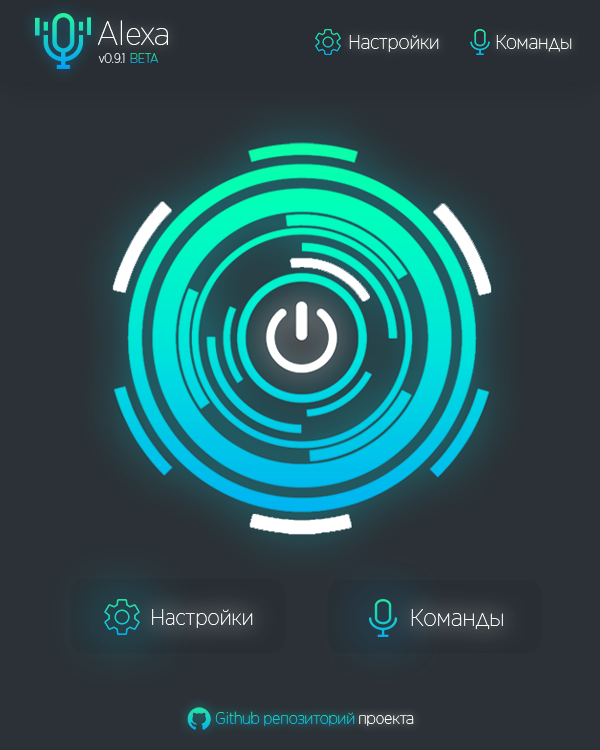
<style>
.page{position:relative;width:600px;height:750px;background:#2b3136}
.page>*{position:absolute;margin:0}
.t1{font:33.6px "GothamNarrow-Thin";letter-spacing:-0.01em;color:#ffffff}
.t2{font:20.1px "GothamNarrow-Thin";letter-spacing:-0.01em;color:#ffffff}
.t3{font:13.1px "GothamNarrow-Thin";letter-spacing:-0.01em}
.t4{font:22.6px "GothamNarrow-Thin";letter-spacing:-0.01em;color:#ffffff}
.t5{font:24.4px "GothamNarrow-Thin";letter-spacing:-0.01em;color:#ffffff}
.t6{font:16.3px "GothamNarrow-Thin";letter-spacing:-0.01em;color:#13c6d1}
.t7{font:16.3px "GothamNarrow-Thin";letter-spacing:-0.01em;color:#ffffff}
</style>
<div class="page">
<p class="t1" style="left:98px;top:20px;width:70px;height:25px">Alexa</p>
<p class="t2" style="left:349px;top:35px;width:90px;height:17px">Настройки</p>
<p class="t2" style="left:496px;top:35px;width:76px;height:17px">Команды</p>
<p class="t3" style="left:98px;top:53px;width:27px;height:10px">v0.9.1</p>
<p class="t3" style="left:130px;top:53px;width:29px;height:10px">BETA</p>
<p class="t4" style="left:152px;top:609px;width:101px;height:19px">Настройки</p>
<p class="t5" style="left:411px;top:609px;width:92px;height:21px">Команды</p>
<p class="t6" style="left:215px;top:711px;width:140px;height:15px">Github репозиторий</p>
<p class="t7" style="left:359px;top:715px;width:55px;height:11px">проекта</p>
</div>
